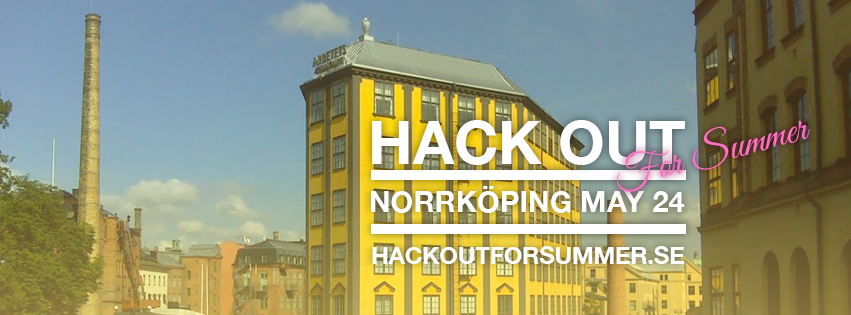
<style>
.page{position:relative;width:851px;height:315px}
.page>*{position:absolute;margin:0}
.t1{font:60px "HelveticaNeue-Bold";color:#ffffff}
.t2{font:42.6px "GreatVibes-Regular";color:#ff70c3}
.t3{font:29.3px "HelveticaNeue-Bold";color:#ffffff}
.t4{font:23.6px "HelveticaNeue-Bold";color:#ffffff}
</style>
<div class="page">
<p class="t1" style="left:372px;top:120px;width:313px;height:45px">HACK OUT</p>
<p class="t2" style="left:616px;top:120px;width:194px;height:72px;rotate:-15deg">For Summer</p>
<p class="t3" style="left:371px;top:186px;width:314px;height:27px">NORRKÖPING MAY 24</p>
<p class="t4" style="left:372px;top:246px;width:312px;height:18px">HACKOUTFORSUMMER.SE</p>
</div>
